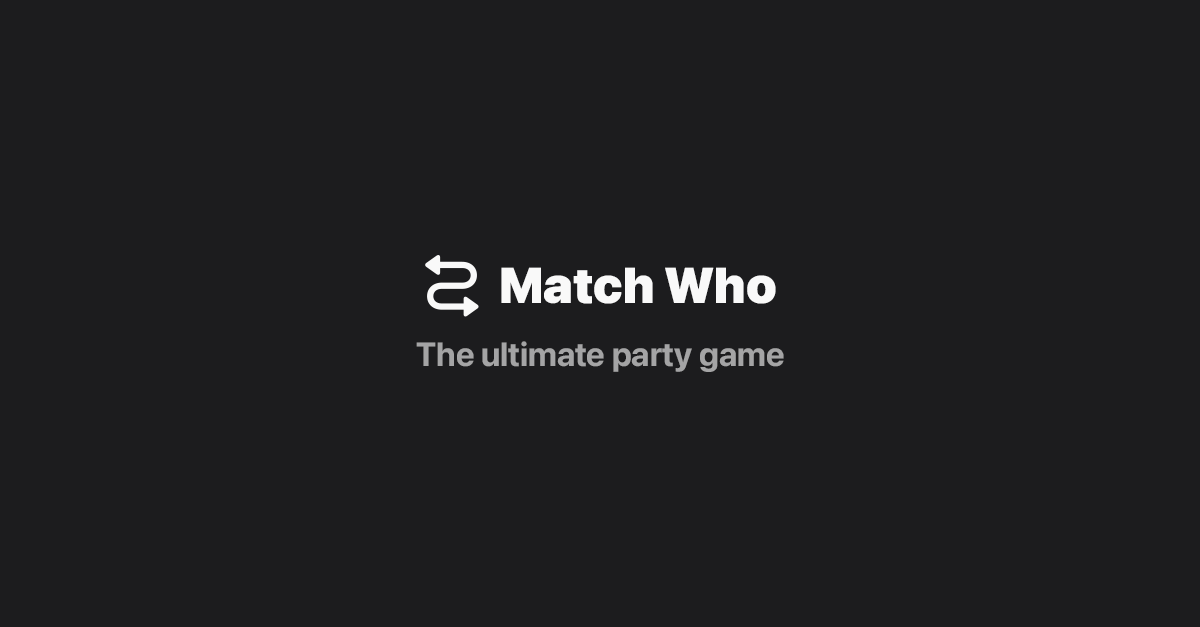
<style>
.page{position:relative;width:1200px;height:627px;background:#1c1c1e}
.page>*{position:absolute;margin:0}
.t1{font:50px "SFPro-Black";color:#f9f9f9}
.t2{font:33.3px "SFPro-Bold";color:#a4a4a5}
</style>
<div class="page">
<p class="t1" style="left:501px;top:267px;width:275px;height:37px">Match Who</p>
<p class="t2" style="left:416px;top:341px;width:368px;height:31px">The ultimate party game</p>
</div>
